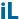
<style>
.page{position:relative;width:19px;height:19px;background:#ffffff}
.page>*{position:absolute;margin:0}
.t1{font:24px "MyriadPro-Bold";color:#006699}
</style>
<div class="page">
<p class="t1" style="left:1px;top:2px;width:18px;height:17px">iL</p>
</div>
